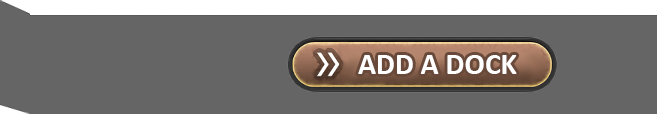
<style>
.page{position:relative;width:657px;height:114px;background:#656565}
.page>*{position:absolute;margin:0}
.t1{font:30px "Calibri-Bold";color:#ffffff}
</style>
<div class="page">
<p class="t1" style="left:358px;top:55px;width:159px;height:19px">ADD A DOCK</p>
</div>
